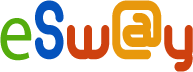
<style>
.page{position:relative;width:193px;height:72px;background:#ffffff}
.page>*{position:absolute;margin:0}
.t1{font:83.3px "MyriadWebPro";color:#54ac0d;scale:0.83 1}
.t2{font:83.3px "NanosecondThickBRK";color:#0553bd;scale:0.83 1}
.t3{font:83.3px "NanosecondThickBRK";color:#ce410f;scale:0.83 1}
.t4{font:83.3px "NanosecondThickBRK";color:#e8980c;scale:0.83 1}
</style>
<div class="page">
<p class="t1" style="left:0px;top:0px;width:193px;height:72px">e<span class="t2">S</span><span class="t3">w</span><span class="t4">@</span><span class="t3">y</span></p>
</div>
